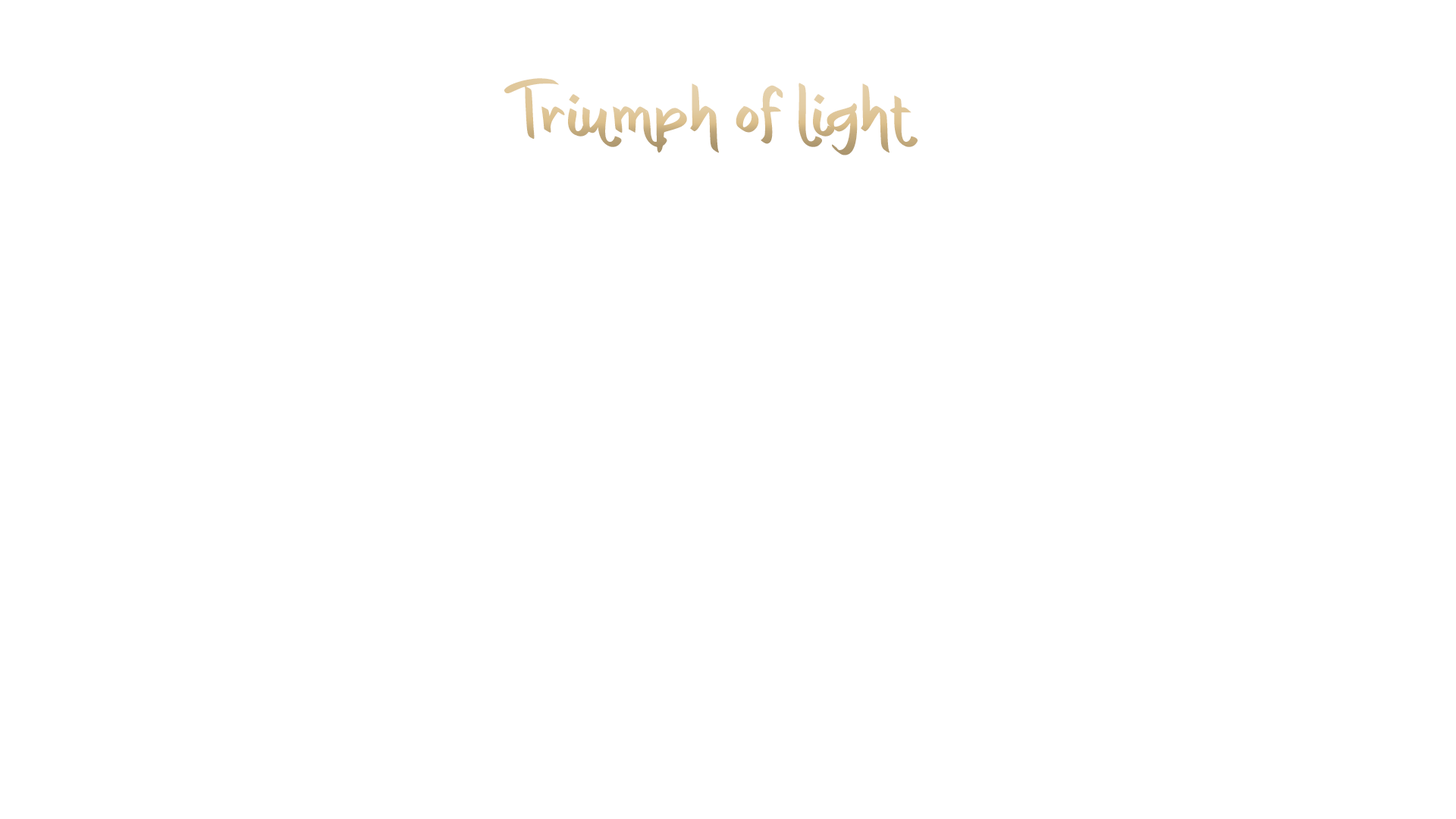
<style>
.page{position:relative;width:1456px;height:819px;background:#ffffff}
.page>*{position:absolute;margin:0}
.t1{font:75.8px "bBerlebaranOnline";color:#dbbf8c}
</style>
<div class="page">
<p class="t1" style="left:504px;top:78px;width:414px;height:77px">Triumph of light</p>
</div>
